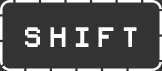
<style>
.page{position:relative;width:162px;height:71px;background:#333333}
.page>*{position:absolute;margin:0}
.t1{font:25px "PixelSplitter-Bold";color:#ffffff}
</style>
<div class="page">
<p class="t1" style="left:25px;top:27px;width:112px;height:20px">S h i f t</p>
</div>
